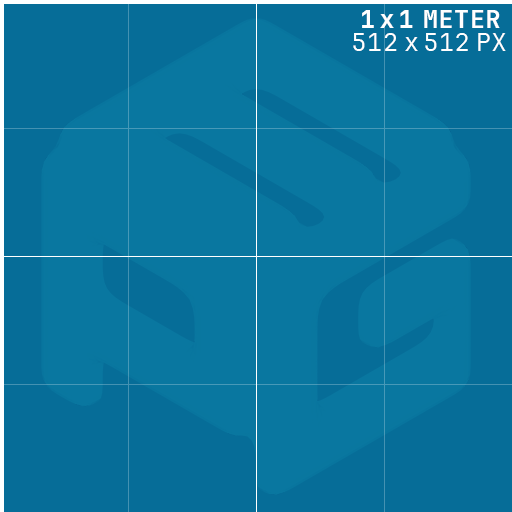
<style>
.page{position:relative;width:512px;height:512px;background:#066d98}
.page>*{position:absolute;margin:0}
.t1{font:25px "JetBrainsMono-Bold";letter-spacing:-0.215em;color:#ffffff}
.t2{font:25px "JetBrainsMono-Bold";letter-spacing:0.025em;color:#ffffff}
.t3{font:25px "JetBrainsMono-Light";letter-spacing:0.025em;color:#ffffff}
.t4{font:25px "JetBrainsMono-Light";letter-spacing:-0.055em;color:#ffffff}
</style>
<div class="page">
<p class="t1" style="left:362px;top:10px;width:138px;height:18px">1 x 1 <span class="t2">METER</span></p>
<p class="t3" style="left:353px;top:33px;width:153px;height:18px">512 <span class="t4">x </span>512 PX</p>
</div>
